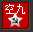
<style>
.page{position:relative;width:33px;height:32px;background:#c50000}
.page>*{position:absolute;margin:0}
.t1{font:10.8px "SimSun";color:#ffffff}
</style>
<div class="page">
<p class="t1" style="left:5px;top:4px;width:20px;height:10px">空九</p>
</div>
